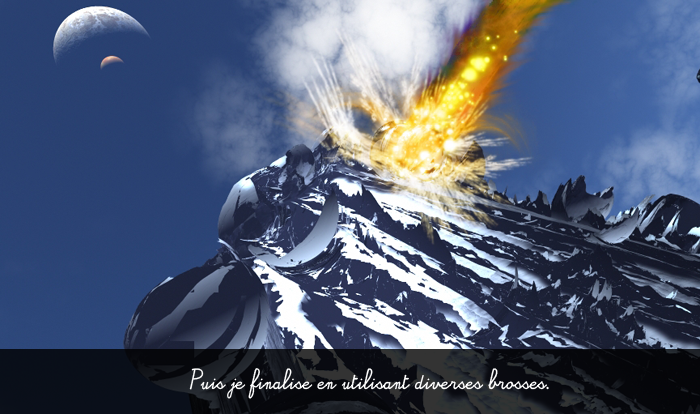
<style>
.page{position:relative;width:700px;height:414px}
.page>*{position:absolute;margin:0}
.t1{font:13.9px/20.5px "Alamain";color:#ffffff}
</style>
<div class="page">
<p class="t1" style="left:189px;top:368px;width:360px;height:31px">Puis je finalise en utilisant diverses brosses.</p>
</div>
